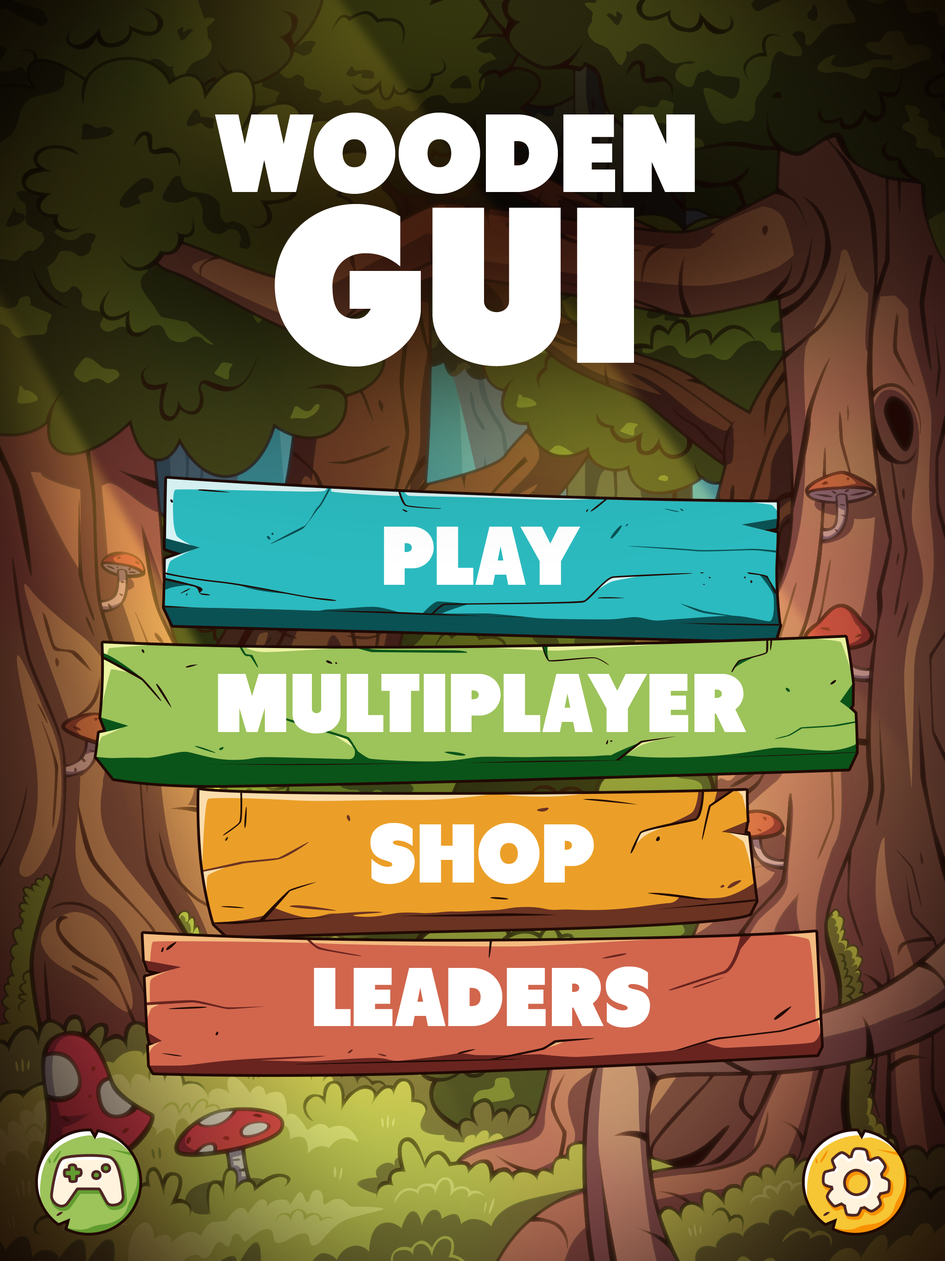
<style>
.page{position:relative;width:945px;height:1261px}
.page>*{position:absolute;margin:0}
.t1{font:110.8px/110.8px "Tondu-Beta";color:#ffffff;text-transform:uppercase}
.t2{font:221.6px/170.8px "Tondu-Beta";color:#ffffff;text-transform:uppercase}
.t3{font:83.1px "Tondu-Beta";color:#ffffff;text-transform:uppercase}
</style>
<div class="page">
<p class="t1" style="left:215px;top:113px;width:480px;height:254px;text-align:center">Wooden<br><span class="t2">GUI</span></p>
<p class="t3" style="left:384px;top:527px;width:197px;height:58px">play</p>
<p class="t3" style="left:218px;top:674px;width:529px;height:60px">multiplayer</p>
<p class="t3" style="left:370px;top:823px;width:224px;height:62px">shop</p>
<p class="t3" style="left:314px;top:967px;width:336px;height:61px">leaders</p>
</div>
